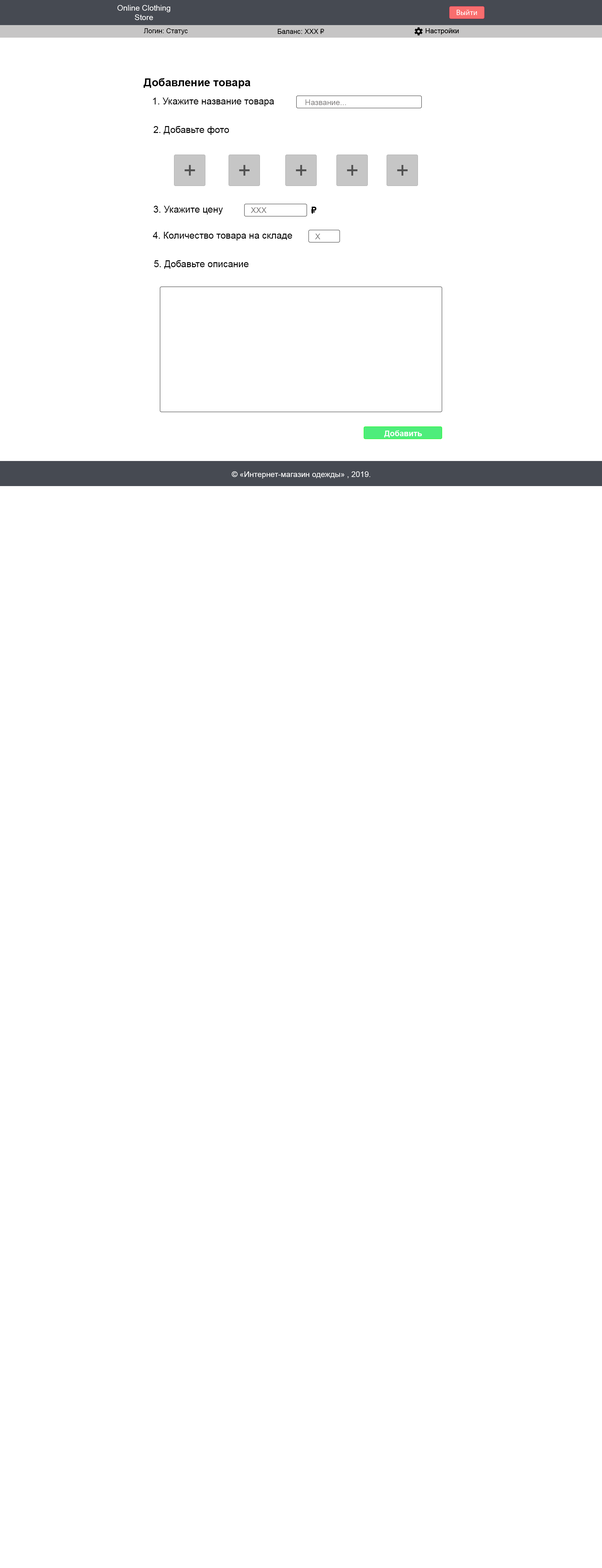
<style>
.page{position:relative;width:602px;height:1568px;background:#ffffff}
.page>*{position:absolute;margin:0}
.t1{font:7.8px "ArialMT";color:#ffffff}
.t2{font:6.9px "ArialMT";color:#000000}
.t3{font:11px "Arial-BoldMT";color:#000000}
.t4{font:9.4px "ArialMT";color:#000000}
</style>
<div class="page">
<p class="t1" style="left:117px;top:5px;width:53px;height:15px;text-align:center">Online Clothing<br>Store</p>
<p class="t2" style="left:144px;top:28px;width:44px;height:6px">Логин: Статус</p>
<p class="t2" style="left:278px;top:29px;width:46px;height:5px">Баланс: XXX ₽</p>
<p class="t3" style="left:144px;top:78px;width:107px;height:10px">Добавление товара</p>
<p class="t4" style="left:153px;top:98px;width:121px;height:8px">1. Укажите название товара</p>
<p class="t4" style="left:153px;top:126px;width:76px;height:9px">2. Добавьте фото</p>
<p class="t4" style="left:154px;top:206px;width:69px;height:9px">3. Укажите цену</p>
<p class="t4" style="left:153px;top:232px;width:139px;height:9px">4. Количество товара на складе</p>
<p class="t4" style="left:154px;top:260px;width:95px;height:9px">5. Добавьте описание</p>
<p class="t1" style="left:232px;top:471px;width:138px;height:8px">© «Интернет-магазин одежды» , 2019.</p>
</div>
